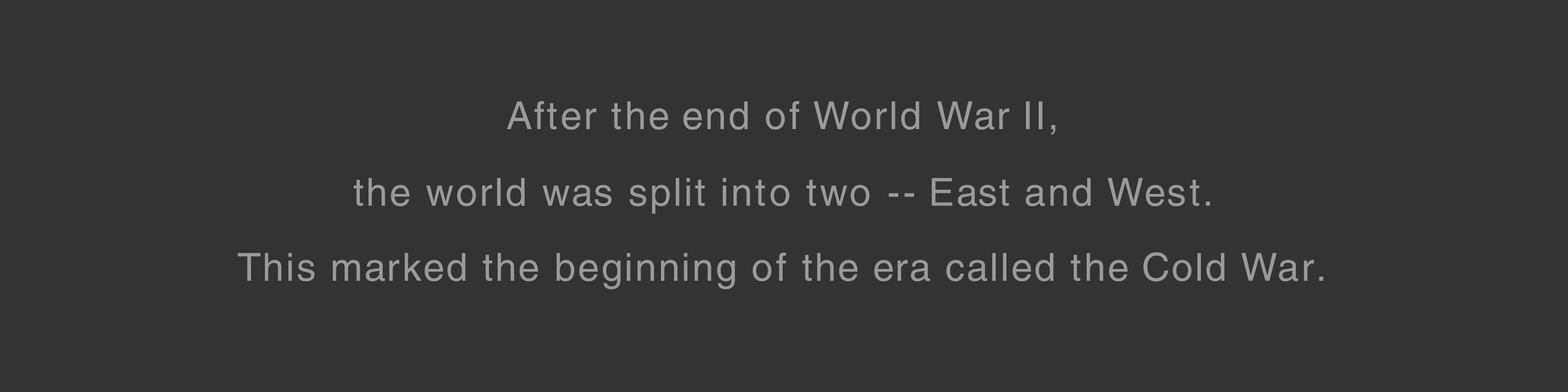
<style>
.page{position:relative;width:1568px;height:392px;background:#333333}
.page>*{position:absolute;margin:0}
.t1{font:38.6px "Helvetica";letter-spacing:0.051em;color:#9a9a9a}
.t2{font:38.6px "Helvetica";letter-spacing:0.08em;color:#9a9a9a}
.t3{font:38.6px "Helvetica";letter-spacing:0.04em;color:#9a9a9a}
.t4{font:38.6px "Helvetica";letter-spacing:0.03em;color:#9a9a9a}
.t5{font:38.6px "Helvetica";letter-spacing:0.02em;color:#9a9a9a}
.t6{font:38.6px "Helvetica";letter-spacing:0.055em;color:#9a9a9a}
.t7{font:38.6px "Helvetica";letter-spacing:0.045em;color:#9a9a9a}
.t8{font:38.6px "Helvetica";letter-spacing:0.1em;color:#9a9a9a}
.t9{font:38.6px "Helvetica";letter-spacing:0.057em;color:#9a9a9a}
.t10{font:38.6px "Helvetica";letter-spacing:0.05em;color:#9a9a9a}
.t11{font:38.6px "Helvetica";color:#9a9a9a}
.t12{font:38.6px "Helvetica";letter-spacing:0.035em;color:#9a9a9a}
.t13{font:38.6px "Helvetica";letter-spacing:0.075em;color:#9a9a9a}
.t14{font:38.6px "Helvetica";letter-spacing:0.06em;color:#9a9a9a}
.t15{font:38.6px "Helvetica";letter-spacing:0.049em;color:#9a9a9a}
</style>
<div class="page">
<p class="t1" style="left:507px;top:101px;width:549px;height:34px">Af<span class="t2">t</span><span class="t3">e</span>r <span class="t2">t</span>he end <span class="t2">o</span>f World <span class="t4">W</span><span class="t5">ar </span>II,</p>
<p class="t6" style="left:354px;top:178px;width:856px;height:36px">the world <span class="t7">w</span><span class="t5">a</span>s split in<span class="t8">t</span>o <span class="t2">t</span>wo<span class="t2"> -</span><span class="t9">- </span><span class="t10">E</span><span class="t11">a</span><span class="t10">st and </span><span class="t5">W</span><span class="t12">e</span><span class="t13">s</span><span class="t14">t</span><span class="t10">.</span></p>
<p class="t15" style="left:238px;top:252px;width:1086px;height:37px">This m<span class="t5">a</span>rk<span class="t3">e</span>d the beginning <span class="t2">o</span>f the<span class="t5"> e</span>ra called <span class="t2">t</span>he Cold Wa<span class="t10">r</span>.</p>
</div>
